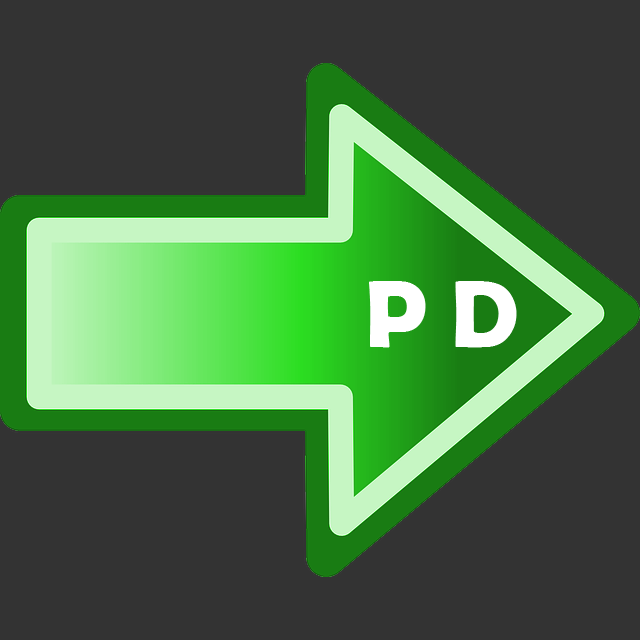
<style>
.page{position:relative;width:640px;height:640px;background:#333333}
.page>*{position:absolute;margin:0}
.t1{font:96px "BerlinSansFBDemi-Bold";color:#ffffff}
</style>
<div class="page">
<p class="t1" style="left:369px;top:281px;width:148px;height:67px">P D</p>
</div>
